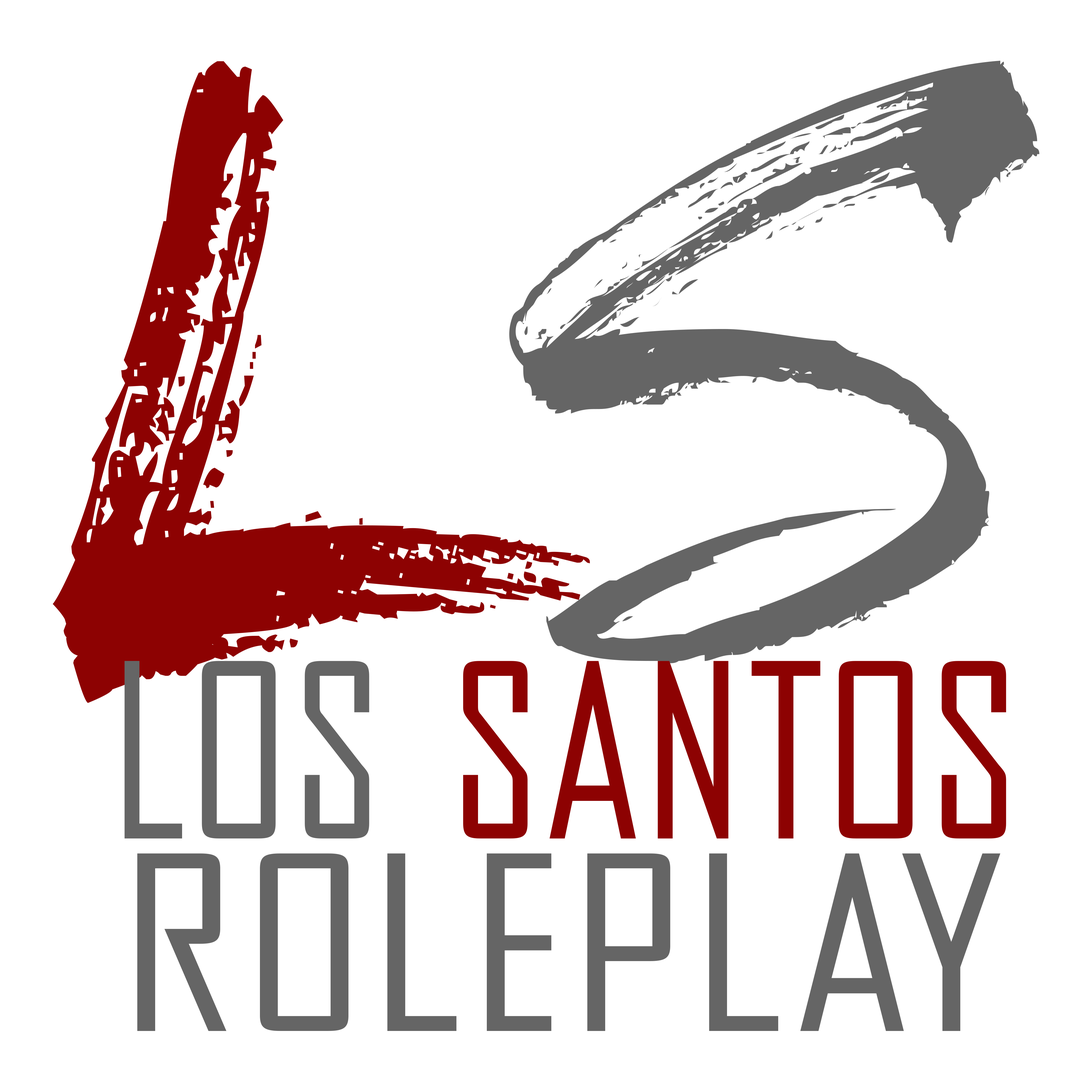
<style>
.page{position:relative;width:1092px;height:1092px;background:#ffffff}
.page>*{position:absolute;margin:0}
.t1{font:813.1px "DryBrush";letter-spacing:0.05em;color:#8d0202;text-transform:uppercase;scale:0.94 1}
.t2{font:993.8px "Streetbrush";letter-spacing:0.05em;color:#656565;text-transform:uppercase;scale:0.73 1}
.t3{font:222.2px/192.5px "OPTIAgency-Gothic";letter-spacing:0.065em;color:#656565;text-transform:uppercase;scale:1.2 1}
.t4{font:222.2px/192.5px "OPTIAgency-Gothic";letter-spacing:0.05em;color:#656565;text-transform:uppercase}
.t5{font:222.2px/192.5px "OPTIAgency-Gothic";letter-spacing:0.05em;color:#8d0202;text-transform:uppercase}
</style>
<div class="page">
<p class="t1" style="left:53px;top:61px;width:537px;height:642px">L</p>
<p class="t2" style="left:509px;top:61px;width:530px;height:602px">S</p>
<p class="t3" style="left:125px;top:661px;width:881px;height:370px;text-align:center"><span class="t4">LOS </span><span class="t5">SANTOS<br></span>ROLEPLAY</p>
</div>
